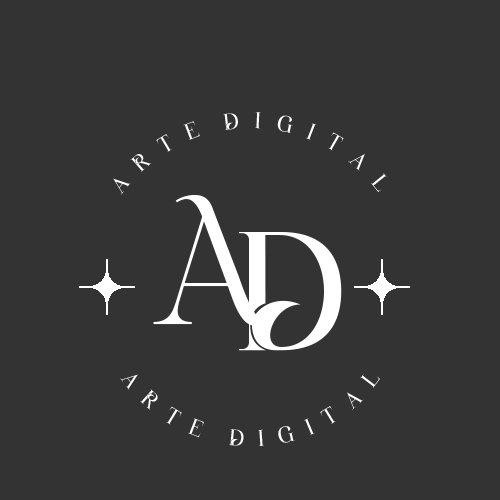
<style>
.page{position:relative;width:500px;height:500px;background:#333333}
.page>*{position:absolute;margin:0}
.t1{font:23px "Auralyess-Free-Trial";letter-spacing:-0.01em;color:#ffffff}
.t2{font:160px "BellagiaDisplay-Thin";letter-spacing:-0.01em;color:#ffffff}
.t3{font:170px "Auralyess-Free-Trial";letter-spacing:-0.01em;color:#ffffff}
</style>
<div class="page">
<p class="t1" style="left:113px;top:112px;width:274px;height:83px;text-align:center">A   R   T   E     D   I   G   I   T   A   L</p>
<p class="t2" style="left:153px;top:194px;width:117px;height:132px">A</p>
<p class="t3" style="left:239px;top:232px;width:103px;height:119px">D</p>
<p class="t1" style="left:120px;top:374px;width:260px;height:72px;text-align:center">A   R   T   E      D   I   G   I   T   A   L</p>
</div>
